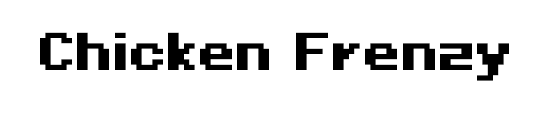
<style>
.page{position:relative;width:549px;height:114px;background:#ffffff}
.page>*{position:absolute;margin:0}
.t1{font:48px "PixeloidSans-Bold";color:#000000}
</style>
<div class="page">
<p class="t1" style="left:40px;top:32px;width:469px;height:49px">Chicken Frenzy</p>
</div>
